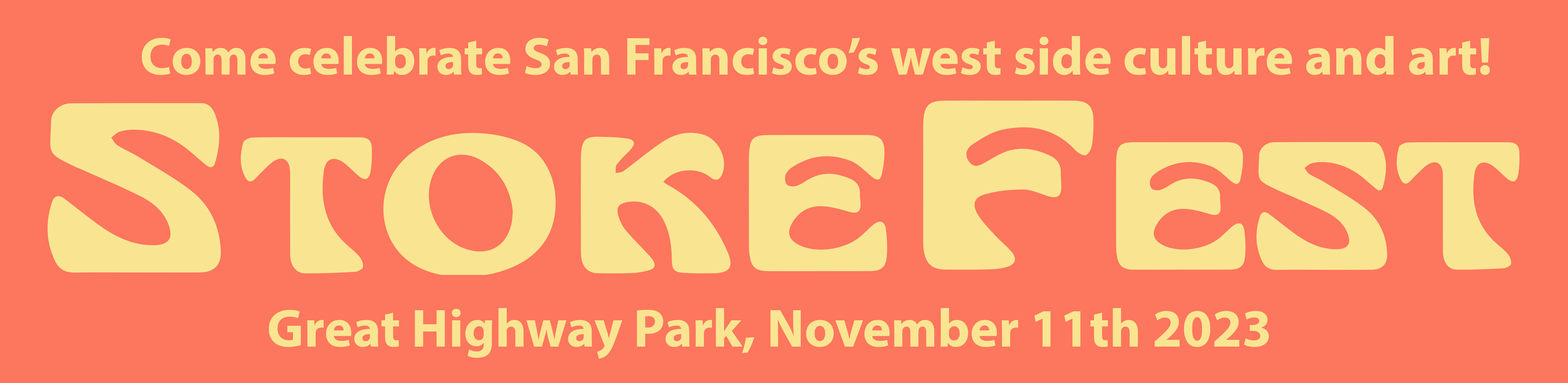
<style>
.page{position:relative;width:1568px;height:383px;background:#fd765e}
.page>*{position:absolute;margin:0}
.t1{font:54px "MyriadPro-Bold";color:#f9e591}
</style>
<div class="page">
<p class="t1" style="left:142px;top:36px;width:1348px;height:39px">Come celebrate San Francisco’s west side culture and art!</p>
<p class="t1" style="left:269px;top:308px;width:1000px;height:50px">Great Highway Park, November 11th 2023</p>
</div>
